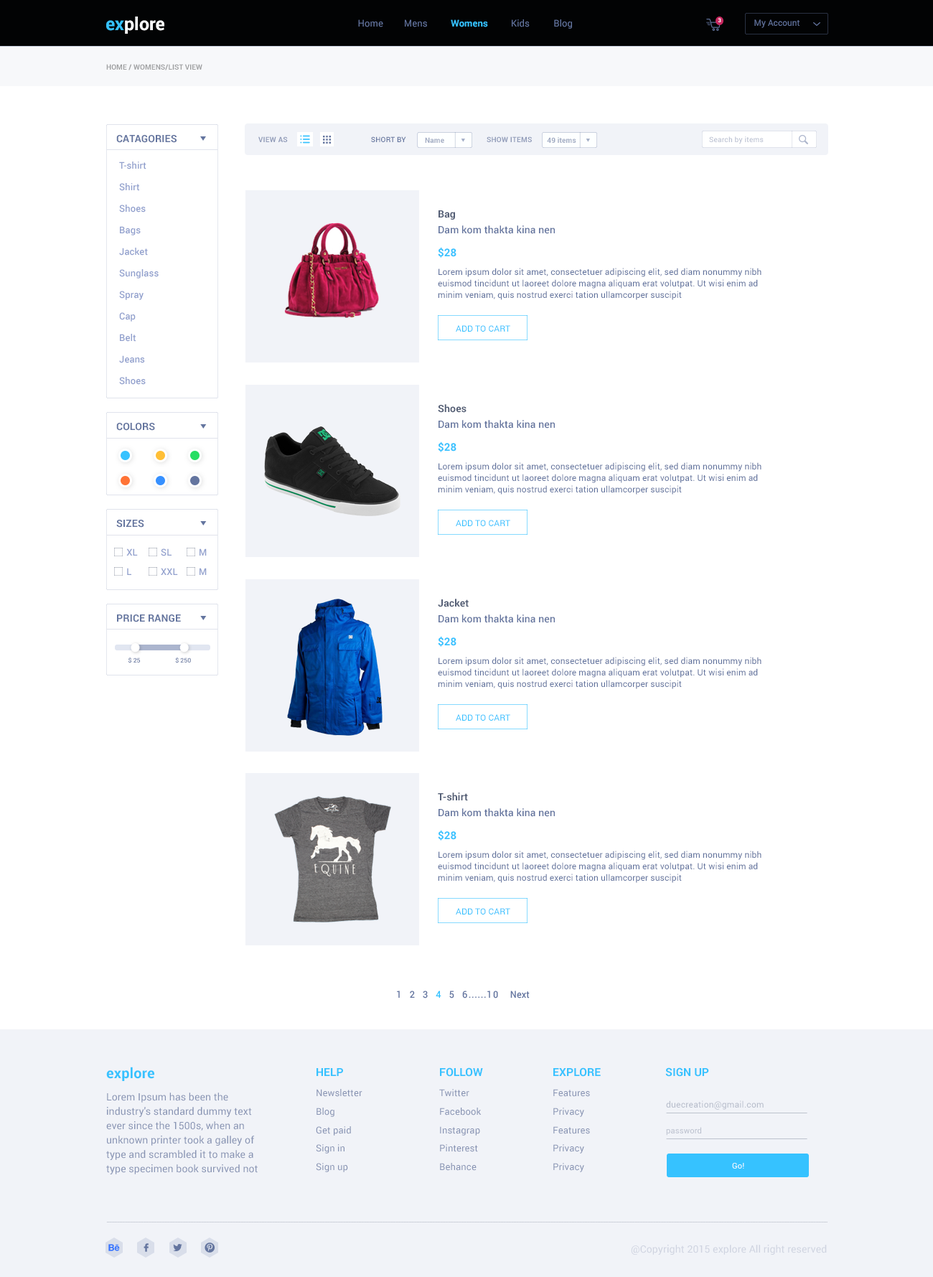
<style>
.page{position:relative;width:933px;height:1277px;background:#ffffff}
.page>*{position:absolute;margin:0}
.t1{font:18px "Roboto-Bold";color:#ffffff}
.t2{font:18px "Roboto-Bold";color:#36c2ff}
.t3{font:5.5px "Roboto-Bold";letter-spacing:0.01em;color:#ffffff}
.t4{font:9.3px "Roboto-Regular";letter-spacing:0.01em;color:#64759f}
.t5{font:9.3px "Roboto-Bold";letter-spacing:0.01em;color:#36c2ff}
.t6{font:8.6px "Roboto-Regular";color:#64759f}
.t7{font:7.2px "Roboto-Bold";letter-spacing:0.01em;color:#9e9fa0}
.t8{font:7.2px "Roboto-Bold";letter-spacing:0.01em;color:#9e9fa0;text-transform:uppercase}
.t9{font:10.1px "Roboto-Bold";letter-spacing:0.01em;color:#64759f}
.t10{font:7.2px "Roboto-Bold";letter-spacing:0.02em;color:#909bb9;text-transform:uppercase}
.t11{font:7.2px "Roboto-Medium";letter-spacing:0.02em;color:#64759f;text-transform:uppercase}
.t12{font:7.2px "Roboto-Bold";letter-spacing:0.01em;color:#a0aac2}
.t13{font:7.2px "Roboto-Regular";letter-spacing:0.02em;color:#b2b9cd}
.t14{font:9.3px/21.5px "Roboto-Medium";letter-spacing:0.01em;color:#91a0cd}
.t15{font:10.1px "Roboto-Bold";letter-spacing:0.01em;color:#555f76}
.t16{font:10.1px "Roboto-Medium";letter-spacing:0.01em;color:#64759f}
.t17{font:10.8px "Roboto-Bold";letter-spacing:0.01em;color:#36c2ff;text-transform:uppercase}
.t18{font:8.6px/11.5px "Roboto-Regular";letter-spacing:0.01em;color:#64759f}
.t19{font:8.6px "Roboto-Regular";letter-spacing:0.01em;color:#36c2ff}
.t20{font:9.3px "Roboto-Medium";letter-spacing:0.01em;color:#91a0cd}
.t21{font:6.3px "Roboto-Medium";color:#64759f}
.t22{font:14.4px "Roboto-Bold";letter-spacing:0.01em;color:#36c2ff}
.t23{font:9.3px/18.6px "Roboto-Regular";letter-spacing:0.01em;color:#8793b3}
.t24{font:11px/20.1px "Roboto-Bold";letter-spacing:0.01em;color:#36c2ff}
.t25{font:9.3px/20.1px "Roboto-Regular";letter-spacing:0.01em;color:#8793b3}
.t26{font:11px/20.1px "Roboto-Bold";letter-spacing:0.01em;color:#36c2ff;text-transform:uppercase}
.t27{font:11px "Roboto-Bold";letter-spacing:0.01em;color:#36c2ff}
.t28{font:10.1px/14.4px "Roboto-Regular";letter-spacing:0.01em;color:#8793b3}
.t29{font:10.1px/19.4px "Roboto-Regular";letter-spacing:0.01em;color:#8793b3}
.t30{font:8.6px "Roboto-Regular";letter-spacing:0.02em;color:#b8becc}
.t31{font:7.9px "Roboto-Regular";letter-spacing:0.02em;color:#b8becc}
.t32{font:7.9px "Roboto-Regular";letter-spacing:0.02em;color:#ffffff}
.t33{font:10.1px "Roboto-Regular";letter-spacing:0.01em;color:#cfd3e0}
</style>
<div class="page">
<p class="t1" style="left:106px;top:17px;width:58px;height:17px"><span class="t2">ex</span>plore</p>
<p class="t3" style="left:718px;top:18px;width:4px;height:4px">3</p>
<p class="t4" style="left:358px;top:19px;width:25px;height:8px">Home</p>
<p class="t4" style="left:405px;top:19px;width:22px;height:8px">Mens</p>
<p class="t5" style="left:451px;top:19px;width:37px;height:8px">Womens</p>
<p class="t4" style="left:512px;top:19px;width:18px;height:8px">Kids</p>
<p class="t4" style="left:554px;top:19px;width:18px;height:10px">Blog</p>
<p class="t6" style="left:755px;top:19px;width:45px;height:9px">My Account</p>
<p class="t7" style="left:106px;top:64px;width:96px;height:6px">HOME / WOMENS/<span class="t8">list view</span></p>
<p class="t9" style="left:116px;top:135px;width:61px;height:8px">CATAGORIES</p>
<p class="t10" style="left:258px;top:136px;width:30px;height:6px">View as</p>
<p class="t11" style="left:371px;top:136px;width:35px;height:6px">Short by</p>
<p class="t12" style="left:425px;top:137px;width:19px;height:6px">Name</p>
<p class="t10" style="left:487px;top:136px;width:45px;height:6px">Show items</p>
<p class="t12" style="left:547px;top:137px;width:30px;height:6px">49 items</p>
<p class="t13" style="left:709px;top:136px;width:55px;height:8px">Search by items</p>
<p class="t14" style="left:119px;top:162px;width:40px;height:223px">T-shirt<br>Shirt<br>Shoes<br>Bags<br>Jacket<br>Sunglass<br>Spray<br>Cap<br>Belt<br>Jeans<br>Shoes</p>
<p class="t15" style="left:439px;top:210px;width:16px;height:10px">Bag</p>
<p class="t16" style="left:439px;top:225px;width:116px;height:9px">Dam kom thakta kina nen</p>
<p class="t17" style="left:438px;top:247px;width:19px;height:11px">$28</p>
<p class="t18" style="left:438px;top:268px;width:324px;height:32px">Lorem ipsum dolor sit amet, consectetuer adipiscing elit, sed diam nonummy nibh euismod tincidunt ut laoreet dolore magna aliquam erat volutpat. Ut wisi enim ad minim veniam, quis nostrud exerci tation ullamcorper suscipit</p>
<p class="t19" style="left:456px;top:325px;width:55px;height:7px">ADD TO CART</p>
<p class="t15" style="left:438px;top:404px;width:29px;height:9px">Shoes</p>
<p class="t9" style="left:116px;top:423px;width:39px;height:8px">COLORS</p>
<p class="t16" style="left:439px;top:420px;width:116px;height:9px">Dam kom thakta kina nen</p>
<p class="t17" style="left:438px;top:442px;width:19px;height:10px">$28</p>
<p class="t18" style="left:438px;top:462px;width:324px;height:33px">Lorem ipsum dolor sit amet, consectetuer adipiscing elit, sed diam nonummy nibh euismod tincidunt ut laoreet dolore magna aliquam erat volutpat. Ut wisi enim ad minim veniam, quis nostrud exerci tation ullamcorper suscipit</p>
<p class="t9" style="left:116px;top:520px;width:28px;height:8px">SIZES</p>
<p class="t19" style="left:456px;top:520px;width:55px;height:6px">ADD TO CART</p>
<p class="t20" style="left:126px;top:549px;width:12px;height:7px">XL</p>
<p class="t20" style="left:161px;top:549px;width:11px;height:7px">SL</p>
<p class="t20" style="left:200px;top:549px;width:7px;height:7px">M</p>
<p class="t20" style="left:127px;top:568px;width:4px;height:7px">L</p>
<p class="t20" style="left:161px;top:568px;width:17px;height:7px">XXL</p>
<p class="t20" style="left:200px;top:568px;width:7px;height:7px">M</p>
<p class="t15" style="left:438px;top:599px;width:31px;height:8px">Jacket</p>
<p class="t9" style="left:117px;top:615px;width:64px;height:8px">PRICE RANGE</p>
<p class="t16" style="left:439px;top:615px;width:116px;height:8px">Dam kom thakta kina nen</p>
<p class="t17" style="left:438px;top:636px;width:19px;height:11px">$28</p>
<p class="t21" style="left:129px;top:657px;width:11px;height:6px">$ 25</p>
<p class="t21" style="left:175px;top:657px;width:16px;height:6px">$ 250</p>
<p class="t18" style="left:438px;top:657px;width:324px;height:32px">Lorem ipsum dolor sit amet, consectetuer adipiscing elit, sed diam nonummy nibh euismod tincidunt ut laoreet dolore magna aliquam erat volutpat. Ut wisi enim ad minim veniam, quis nostrud exerci tation ullamcorper suscipit</p>
<p class="t19" style="left:456px;top:714px;width:55px;height:7px">ADD TO CART</p>
<p class="t15" style="left:438px;top:793px;width:30px;height:8px">T-shirt</p>
<p class="t16" style="left:439px;top:809px;width:116px;height:8px">Dam kom thakta kina nen</p>
<p class="t17" style="left:438px;top:830px;width:19px;height:11px">$28</p>
<p class="t18" style="left:438px;top:851px;width:324px;height:32px">Lorem ipsum dolor sit amet, consectetuer adipiscing elit, sed diam nonummy nibh euismod tincidunt ut laoreet dolore magna aliquam erat volutpat. Ut wisi enim ad minim veniam, quis nostrud exerci tation ullamcorper suscipit</p>
<p class="t19" style="left:456px;top:908px;width:55px;height:7px">ADD TO CART</p>
<p class="t22" style="left:106px;top:1067px;width:48px;height:14px">explore</p>
<p class="t23" style="left:316px;top:1068px;width:47px;height:105px"><span class="t24">HELP<br></span><span class="t25">Newsletter<br></span>Blog<br>Get paid<br>Sign in<br>Sign up</p>
<p class="t23" style="left:439px;top:1068px;width:44px;height:103px"><span class="t26">Follow<br></span><span class="t25">Twitter<br></span>Facebook<br>Instagrap<br>Pinterest<br>Behance</p>
<p class="t23" style="left:554px;top:1068px;width:47px;height:105px"><span class="t26">EXPLORE<br></span><span class="t25">Features<br></span>Privacy<br>Features<br>Privacy<br>Privacy</p>
<p class="t27" style="left:666px;top:1068px;width:43px;height:9px">SIGN UP</p>
<p class="t28" style="left:106px;top:1093px;width:152px;height:82px"><span class="t29">Lorem Ipsum has been the </span>industry's standard dummy text ever since the 1500s, when an unknown printer took a galley of type and scrambled it to make a type specimen book survived not</p>
<p class="t30" style="left:666px;top:1101px;width:98px;height:9px">duecreation@gmail.com</p>
<p class="t31" style="left:666px;top:1127px;width:36px;height:9px">password</p>
<p class="t32" style="left:732px;top:1163px;width:13px;height:6px">Go!</p>
<p class="t33" style="left:631px;top:1245px;width:196px;height:10px">@Copyright 2015 explore All right reserved</p>
</div>
